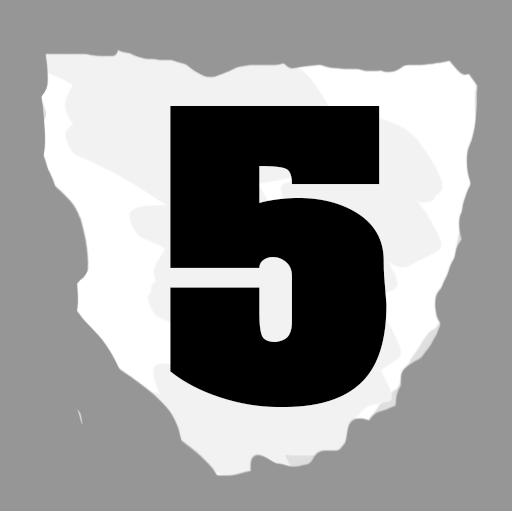
<style>
.page{position:relative;width:512px;height:512px;background:#979696}
.page>*{position:absolute;margin:0}
.t1{font:453.9px "VNI-Auchon-Bold";letter-spacing:-0.015em;color:#000000}
</style>
<div class="page">
<p class="t1" style="left:170px;top:106px;width:217px;height:301px">5</p>
</div>
